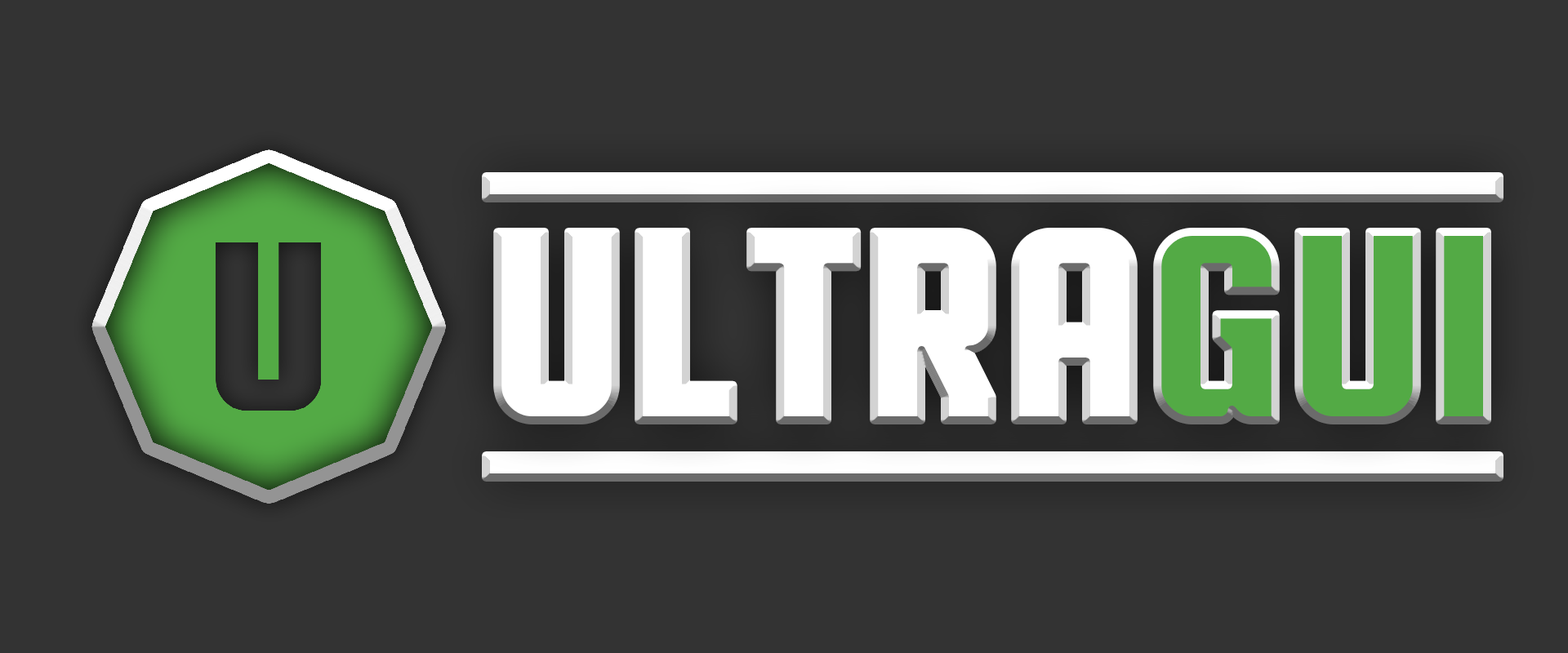
<style>
.page{position:relative;width:1568px;height:653px;background:#333333}
.page>*{position:absolute;margin:0}
.t1{font:329.9px "MotionControl-Bold";color:#ffffff;text-transform:uppercase}
.t2{font:329.9px "MotionControl-Bold";color:#53aa45;text-transform:uppercase}
</style>
<div class="page">
<p class="t1" style="left:497px;top:232px;width:990px;height:189px">ULTRA<span class="t2">GUI</span></p>
</div>
